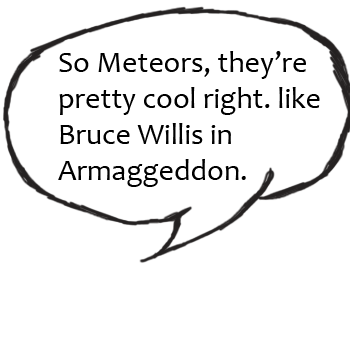
<style>
.page{position:relative;width:350px;height:350px;background:#ffffff}
.page>*{position:absolute;margin:0}
.t1{font:30px "Candara";color:#000000}
</style>
<div class="page">
<p class="t1" style="left:58px;top:51px;width:262px;height:136px">So Meteors, they’re<br>pretty cool right. like<br>Bruce Willis in <br>Armaggeddon.</p>
</div>
